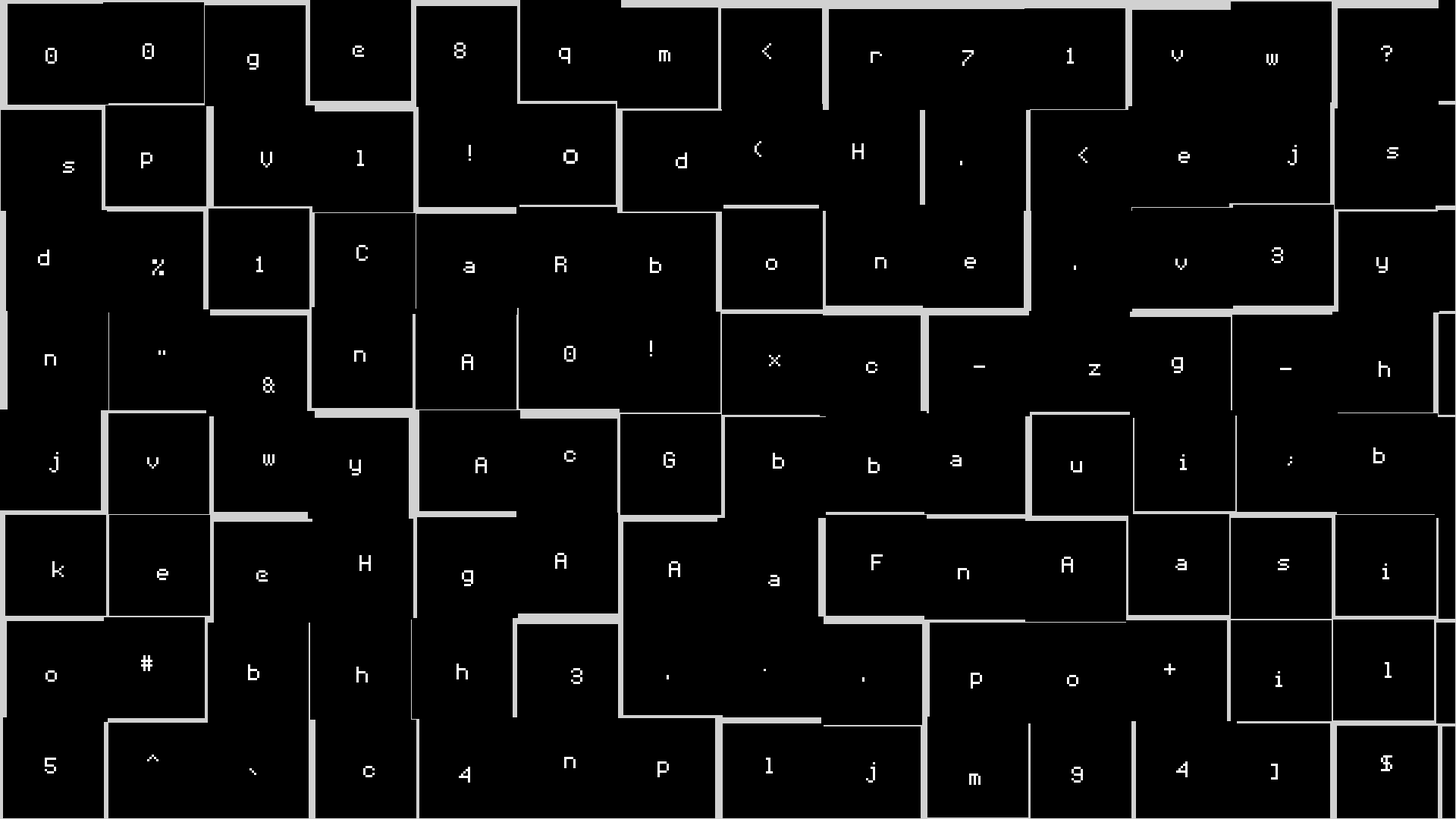
<style>
.page{position:relative;width:1456px;height:819px;background:#000000}
.page>*{position:absolute;margin:0}
.t1{font:36.4px "Coder's-Crux";color:#ffffff}
.t2{font:45.5px "Coder's-Crux";color:#ffffff}
</style>
<div class="page">
<p class="t1" style="left:45px;top:48px;width:12px;height:16px">0</p>
<p class="t1" style="left:143px;top:43px;width:11px;height:16px">0</p>
<p class="t1" style="left:247px;top:54px;width:12px;height:16px">g</p>
<p class="t1" style="left:353px;top:45px;width:11px;height:12px">@</p>
<p class="t1" style="left:454px;top:42px;width:12px;height:16px">8</p>
<p class="t1" style="left:559px;top:48px;width:11px;height:16px">q</p>
<p class="t1" style="left:659px;top:50px;width:11px;height:11px">m</p>
<p class="t1" style="left:762px;top:43px;width:9px;height:16px">&lt;</p>
<p class="t1" style="left:871px;top:52px;width:11px;height:11px">r</p>
<p class="t1" style="left:962px;top:50px;width:12px;height:16px">7</p>
<p class="t1" style="left:1067px;top:48px;width:7px;height:16px">1</p>
<p class="t1" style="left:1172px;top:50px;width:11px;height:11px">v</p>
<p class="t1" style="left:1266px;top:54px;width:12px;height:11px">w</p>
<p class="t1" style="left:1381px;top:45px;width:11px;height:16px">?</p>
<p class="t1" style="left:469px;top:145px;width:2px;height:16px">!</p>
<p class="t2" style="left:563px;top:149px;width:15px;height:15px">o</p>
<p class="t1" style="left:755px;top:141px;width:6px;height:16px">(</p>
<p class="t1" style="left:852px;top:143px;width:12px;height:16px">H</p>
<p class="t1" style="left:1078px;top:147px;width:9px;height:16px">&lt;</p>
<p class="t1" style="left:1288px;top:145px;width:9px;height:20px">j</p>
<p class="t1" style="left:1387px;top:147px;width:11px;height:11px">s</p>
<p class="t1" style="left:63px;top:162px;width:11px;height:11px">s</p>
<p class="t1" style="left:141px;top:152px;width:11px;height:16px">p</p>
<p class="t1" style="left:261px;top:152px;width:11px;height:16px">V</p>
<p class="t1" style="left:357px;top:150px;width:7px;height:16px">l</p>
<p class="t1" style="left:676px;top:152px;width:11px;height:16px">d</p>
<p class="t1" style="left:1178px;top:152px;width:12px;height:11px">e</p>
<p class="t1" style="left:356px;top:245px;width:12px;height:16px">C</p>
<p class="t1" style="left:38px;top:249px;width:11px;height:16px">d</p>
<p class="t1" style="left:256px;top:256px;width:7px;height:16px">1</p>
<p class="t1" style="left:555px;top:256px;width:11px;height:16px">R</p>
<p class="t1" style="left:650px;top:257px;width:11px;height:16px">b</p>
<p class="t1" style="left:875px;top:257px;width:11px;height:11px">n</p>
<p class="t1" style="left:965px;top:257px;width:11px;height:11px">e</p>
<p class="t1" style="left:1272px;top:247px;width:11px;height:16px">3</p>
<p class="t1" style="left:1376px;top:257px;width:12px;height:16px">y</p>
<p class="t1" style="left:152px;top:259px;width:12px;height:16px">%</p>
<p class="t1" style="left:463px;top:262px;width:12px;height:11px">a</p>
<p class="t1" style="left:766px;top:259px;width:11px;height:11px">o</p>
<p class="t1" style="left:1175px;top:259px;width:12px;height:11px">v</p>
<p class="t1" style="left:650px;top:340px;width:2px;height:16px">!</p>
<p class="t1" style="left:158px;top:350px;width:7px;height:5px">“</p>
<p class="t1" style="left:354px;top:350px;width:12px;height:12px">n</p>
<p class="t1" style="left:564px;top:346px;width:12px;height:16px">0</p>
<p class="t1" style="left:45px;top:354px;width:11px;height:12px">n</p>
<p class="t1" style="left:462px;top:354px;width:11px;height:16px">A</p>
<p class="t1" style="left:769px;top:355px;width:11px;height:11px">x</p>
<p class="t1" style="left:866px;top:362px;width:11px;height:11px">c</p>
<p class="t1" style="left:1089px;top:364px;width:11px;height:11px">z</p>
<p class="t1" style="left:1172px;top:357px;width:11px;height:16px">g</p>
<p class="t1" style="left:1379px;top:361px;width:11px;height:16px">h</p>
<p class="t1" style="left:263px;top:377px;width:12px;height:16px">&amp;</p>
<p class="t1" style="left:1373px;top:447px;width:12px;height:16px">b</p>
<p class="t1" style="left:49px;top:452px;width:9px;height:20px">j</p>
<p class="t1" style="left:147px;top:457px;width:11px;height:12px">v</p>
<p class="t1" style="left:263px;top:454px;width:12px;height:12px">w</p>
<p class="t1" style="left:350px;top:460px;width:11px;height:15px">y</p>
<p class="t1" style="left:475px;top:457px;width:12px;height:16px">A</p>
<p class="t1" style="left:564px;top:450px;width:12px;height:12px">c</p>
<p class="t1" style="left:664px;top:452px;width:11px;height:16px">G</p>
<p class="t1" style="left:773px;top:453px;width:11px;height:16px">b</p>
<p class="t1" style="left:868px;top:457px;width:12px;height:16px">b</p>
<p class="t1" style="left:950px;top:455px;width:12px;height:11px">a</p>
<p class="t1" style="left:1071px;top:461px;width:11px;height:11px">u</p>
<p class="t1" style="left:1180px;top:454px;width:7px;height:16px">i</p>
<p class="t1" style="left:1288px;top:457px;width:4px;height:9px">;</p>
<p class="t1" style="left:359px;top:555px;width:12px;height:16px">H</p>
<p class="t1" style="left:555px;top:553px;width:11px;height:16px">A</p>
<p class="t1" style="left:871px;top:554px;width:12px;height:16px">F</p>
<p class="t1" style="left:1062px;top:557px;width:11px;height:16px">A</p>
<p class="t1" style="left:52px;top:561px;width:12px;height:16px">k</p>
<p class="t1" style="left:157px;top:569px;width:11px;height:11px">e</p>
<p class="t1" style="left:669px;top:561px;width:11px;height:16px">A</p>
<p class="t1" style="left:958px;top:568px;width:11px;height:11px">n</p>
<p class="t1" style="left:1175px;top:559px;width:12px;height:11px">a</p>
<p class="t1" style="left:1278px;top:559px;width:11px;height:11px">s</p>
<p class="t1" style="left:1382px;top:563px;width:7px;height:16px">i</p>
<p class="t1" style="left:256px;top:570px;width:12px;height:12px">@</p>
<p class="t1" style="left:462px;top:570px;width:11px;height:16px">g</p>
<p class="t1" style="left:768px;top:575px;width:12px;height:11px">a</p>
<p class="t1" style="left:141px;top:655px;width:11px;height:16px">#</p>
<p class="t1" style="left:248px;top:664px;width:11px;height:16px">b</p>
<p class="t1" style="left:457px;top:664px;width:11px;height:15px">h</p>
<p class="t1" style="left:1164px;top:664px;width:11px;height:11px">+</p>
<p class="t1" style="left:1385px;top:662px;width:7px;height:16px">l</p>
<p class="t1" style="left:45px;top:670px;width:12px;height:12px">o</p>
<p class="t1" style="left:356px;top:667px;width:12px;height:15px">h</p>
<p class="t1" style="left:571px;top:668px;width:11px;height:16px">3</p>
<p class="t1" style="left:971px;top:673px;width:11px;height:16px">p</p>
<p class="t1" style="left:1067px;top:675px;width:11px;height:11px">o</p>
<p class="t1" style="left:1275px;top:671px;width:7px;height:16px">i</p>
<p class="t1" style="left:45px;top:758px;width:11px;height:15px">5</p>
<p class="t1" style="left:147px;top:755px;width:11px;height:6px">^</p>
<p class="t1" style="left:564px;top:757px;width:12px;height:11px">n</p>
<p class="t1" style="left:657px;top:761px;width:12px;height:16px">p</p>
<p class="t1" style="left:766px;top:758px;width:7px;height:15px">l</p>
<p class="t1" style="left:1176px;top:761px;width:12px;height:16px">4</p>
<p class="t1" style="left:1381px;top:755px;width:11px;height:16px">$</p>
<p class="t1" style="left:249px;top:768px;width:7px;height:7px">`</p>
<p class="t1" style="left:363px;top:766px;width:12px;height:11px">c</p>
<p class="t1" style="left:459px;top:767px;width:11px;height:16px">4</p>
<p class="t1" style="left:866px;top:762px;width:9px;height:21px">j</p>
<p class="t1" style="left:969px;top:773px;width:12px;height:12px">m</p>
<p class="t1" style="left:1072px;top:767px;width:11px;height:16px">9</p>
<p class="t1" style="left:1271px;top:764px;width:7px;height:16px">]</p>
</div>
